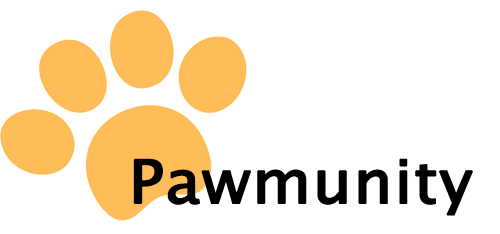
<style>
.page{position:relative;width:500px;height:234px;background:#ffffff}
.page>*{position:absolute;margin:0}
.t1{font:60px "LucidaSans";color:#000000;font-weight:bold;scale:1.05 1}
</style>
<div class="page">
<p class="t1" style="left:133px;top:158px;width:340px;height:58px">Pawmunity</p>
</div>
